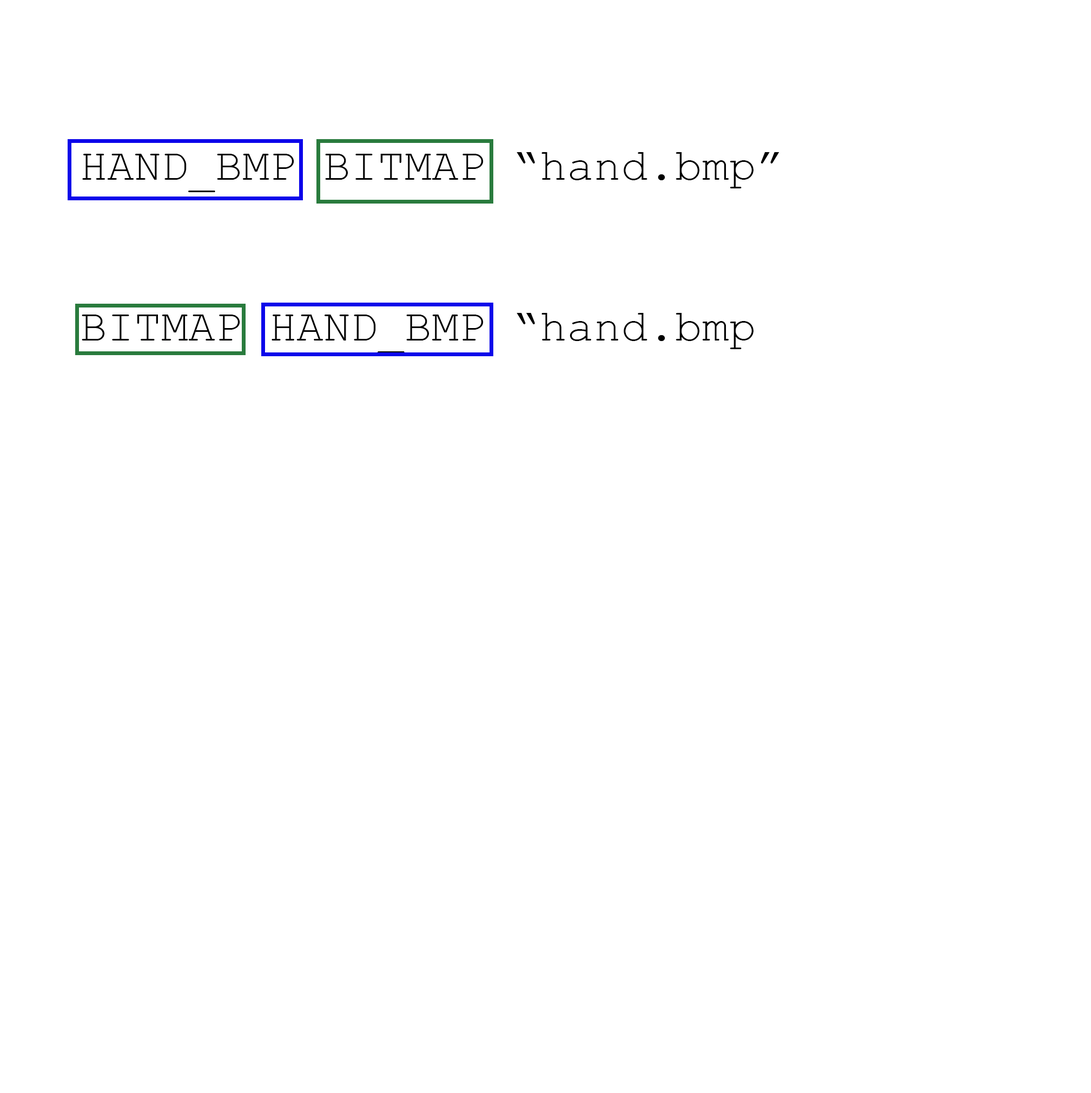
<style>
.page{position:relative;width:1091px;height:1093px;background:#ffffff}
.page>*{position:absolute;margin:0}
.t1{font:45.1px "CourierNewPSMT";color:#000000}
</style>
<div class="page">
<p class="t1" style="left:82px;top:152px;width:698px;height:201px">HAND_BMP BITMAP “hand.bmp”<br><br>BITMAP HAND_BMP “hand.bmp</p>
</div>
